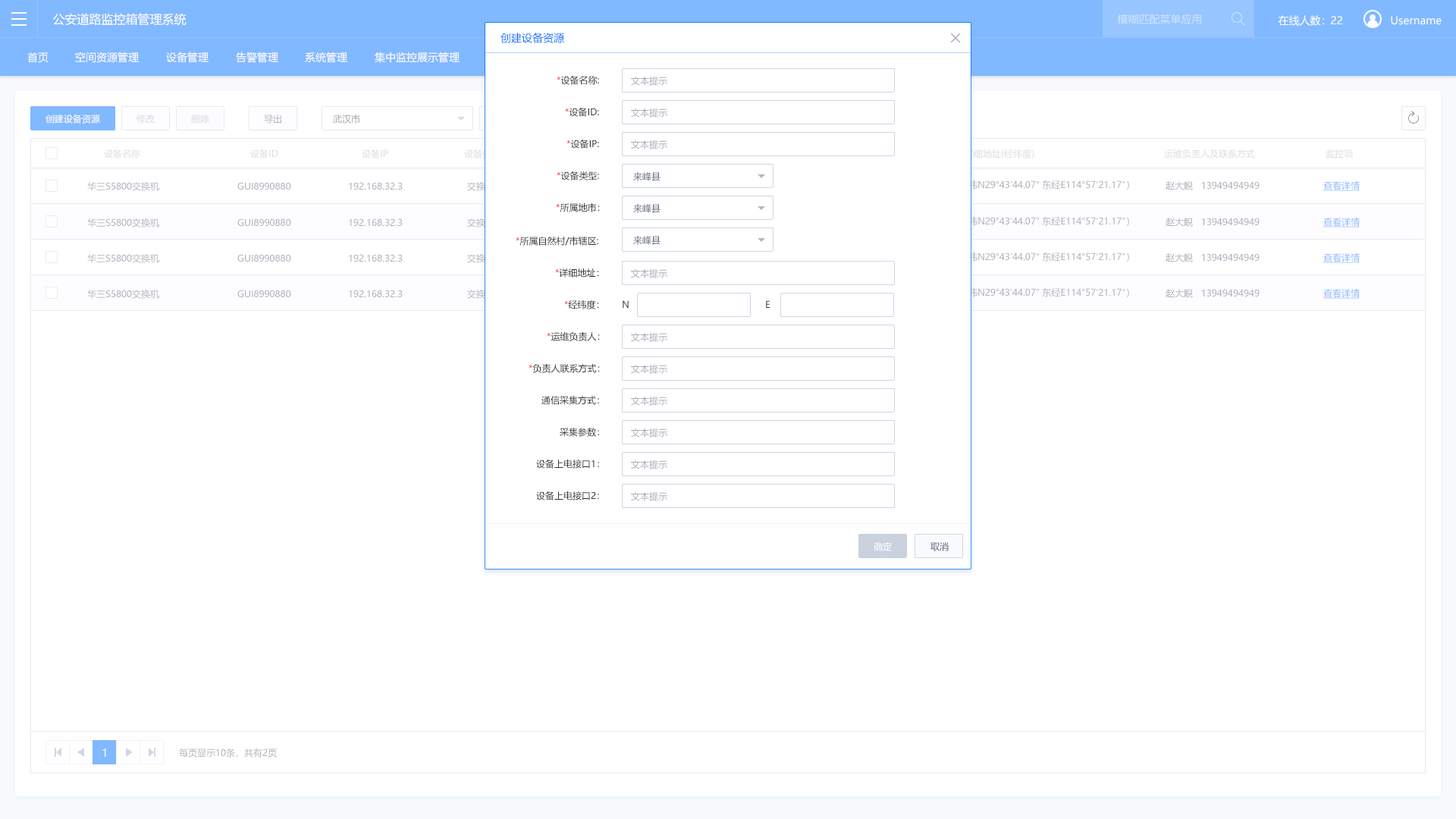
<style>
.page{position:relative;width:1456px;height:819px;background:#ffffff}
.page>*{position:absolute;margin:0}
.t1{font:12.1px "MicrosoftYaHei";color:#ffffff}
.t2{font:10.6px "MicrosoftYaHei";color:#cee4ff}
.t3{font:10.6px "MicrosoftYaHei";color:#ffffff}
.t4{font:10.6px "MicrosoftYaHei";color:#0072ff}
.t5{font:9.1px "MicrosoftYaHei";color:#333333}
.t6{font:9.1px "MicrosoftYaHei";color:#ff0000}
.t7{font:9.1px "MicrosoftYaHei";color:#a8acb5}
.t8{font:9.1px "MicrosoftYaHei";color:#ffffff}
.t9{font:9.1px "MicrosoftYaHei";color:#999999}
.t10{font:9.1px "MicrosoftYaHei";color:#d6d9e3}
.t11{font:9.1px "MicrosoftYaHei"}
.t12{font:9.1px "MicrosoftYaHei";color:#b3b3b3}
.t13{font:9.1px "MicrosoftYaHei";color:#dcdde1}
.t14{font:9.1px "MicrosoftYaHei";color:#596477}
.t15{font:9.1px "MicrosoftYaHei";color:#acb2bb}
.t16{font:9.1px "MicrosoftYaHei";color:#80b9ff;text-decoration:underline}
.t17{font:9.1px "MicrosoftYaHei";color:#fefeff}
.t18{font:10.6px "MicrosoftYaHei";color:#fefeff}
</style>
<div class="page">
<p class="t1" style="left:53px;top:13px;width:134px;height:13px">公安道路监控箱管理系统</p>
<p class="t2" style="left:1117px;top:14px;width:85px;height:11px">模糊匹配菜单应用</p>
<p class="t3" style="left:1278px;top:15px;width:46px;height:11px">在线人数：</p>
<p class="t3" style="left:1331px;top:16px;width:11px;height:8px">22</p>
<p class="t3" style="left:1391px;top:16px;width:51px;height:9px">Username</p>
<p class="t4" style="left:500px;top:33px;width:64px;height:10px">创建设备资源</p>
<p class="t3" style="left:27px;top:52px;width:22px;height:11px">首页</p>
<p class="t3" style="left:75px;top:52px;width:64px;height:11px">空间资源管理</p>
<p class="t3" style="left:166px;top:52px;width:43px;height:11px">设备管理</p>
<p class="t3" style="left:236px;top:52px;width:42px;height:11px">告警管理</p>
<p class="t3" style="left:305px;top:52px;width:42px;height:11px">系统管理</p>
<p class="t3" style="left:375px;top:52px;width:85px;height:11px">集中监控展示管理</p>
<p class="t5" style="left:557px;top:75px;width:42px;height:10px"><span class="t6">*</span>设备名称:</p>
<p class="t7" style="left:631px;top:77px;width:36px;height:9px">文本提示</p>
<p class="t8" style="left:45px;top:114px;width:55px;height:10px">创建设备资源</p>
<p class="t9" style="left:333px;top:114px;width:27px;height:10px">武汉市</p>
<p class="t5" style="left:565px;top:107px;width:34px;height:10px"><span class="t6">*</span>设备ID:</p>
<p class="t7" style="left:631px;top:108px;width:36px;height:10px">文本提示</p>
<p class="t10" style="left:136px;top:115px;width:19px;height:9px">修改</p>
<p class="t11" style="left:191px;top:115px;width:18px;height:9px">删除</p>
<p class="t12" style="left:264px;top:115px;width:17px;height:9px">导出</p>
<p class="t13" style="left:104px;top:149px;width:36px;height:9px">设备名称</p>
<p class="t13" style="left:250px;top:149px;width:28px;height:9px">设备ID</p>
<p class="t13" style="left:362px;top:149px;width:26px;height:9px">设备IP</p>
<p class="t11" style="left:464px;top:149px;width:36px;height:9px">设备类型</p>
<p class="t5" style="left:566px;top:139px;width:33px;height:10px"><span class="t6">*</span>设备IP:</p>
<p class="t7" style="left:631px;top:140px;width:36px;height:9px">文本提示</p>
<p class="t13" style="left:965px;top:149px;width:69px;height:9px">详细地址(经纬度)</p>
<p class="t13" style="left:1164px;top:149px;width:91px;height:9px">运维负责人及联系方式</p>
<p class="t13" style="left:1326px;top:149px;width:27px;height:9px">监控项</p>
<p class="t5" style="left:557px;top:171px;width:42px;height:9px"><span class="t6">*</span>设备类型:</p>
<p class="t14" style="left:633px;top:172px;width:27px;height:9px">来峰县</p>
<p class="t15" style="left:87px;top:182px;width:72px;height:9px">华三S5800交换机</p>
<p class="t15" style="left:237px;top:182px;width:54px;height:8px">GUI8990880</p>
<p class="t15" style="left:349px;top:182px;width:54px;height:8px">192.168.32.3</p>
<p class="t11" style="left:467px;top:182px;width:27px;height:9px">交换机</p>
<p class="t11" style="left:854px;top:180px;width:275px;height:10px">吴家山街道东吴大道1号（北纬N29°43′44.07″ 东经E114°57′21.17″）</p>
<p class="t15" style="left:1166px;top:181px;width:94px;height:9px">赵大鲵   13949494949</p>
<p class="t16" style="left:1323px;top:181px;width:37px;height:10px">查看详情</p>
<p class="t5" style="left:556px;top:202px;width:44px;height:10px"><span class="t6">*</span>所属地市：</p>
<p class="t14" style="left:633px;top:204px;width:27px;height:9px">来峰县</p>
<p class="t15" style="left:87px;top:218px;width:72px;height:9px">华三S5800交换机</p>
<p class="t15" style="left:237px;top:218px;width:54px;height:8px">GUI8990880</p>
<p class="t15" style="left:349px;top:218px;width:54px;height:8px">192.168.32.3</p>
<p class="t11" style="left:467px;top:218px;width:27px;height:9px">交换机</p>
<p class="t11" style="left:854px;top:216px;width:275px;height:10px">吴家山街道东吴大道1号（北纬N29°43′44.07″ 东经E114°57′21.17″）</p>
<p class="t15" style="left:1166px;top:218px;width:94px;height:9px">赵大鲵   13949494949</p>
<p class="t16" style="left:1323px;top:218px;width:37px;height:9px">查看详情</p>
<p class="t5" style="left:516px;top:236px;width:82px;height:10px"><span class="t6">*</span>所属自然村/市辖区:</p>
<p class="t14" style="left:633px;top:236px;width:27px;height:9px">来峰县</p>
<p class="t15" style="left:87px;top:254px;width:72px;height:9px">华三S5800交换机</p>
<p class="t15" style="left:237px;top:254px;width:54px;height:8px">GUI8990880</p>
<p class="t15" style="left:349px;top:254px;width:54px;height:8px">192.168.32.3</p>
<p class="t11" style="left:467px;top:254px;width:27px;height:9px">交换机</p>
<p class="t11" style="left:854px;top:252px;width:275px;height:10px">吴家山街道东吴大道1号（北纬N29°43′44.07″ 东经E114°57′21.17″）</p>
<p class="t15" style="left:1166px;top:253px;width:94px;height:9px">赵大鲵   13949494949</p>
<p class="t16" style="left:1323px;top:253px;width:37px;height:10px">查看详情</p>
<p class="t5" style="left:555px;top:268px;width:44px;height:10px"><span class="t6">*</span>详细地址：</p>
<p class="t7" style="left:631px;top:269px;width:36px;height:9px">文本提示</p>
<p class="t15" style="left:87px;top:290px;width:72px;height:9px">华三S5800交换机</p>
<p class="t15" style="left:237px;top:290px;width:54px;height:7px">GUI8990880</p>
<p class="t15" style="left:349px;top:290px;width:54px;height:7px">192.168.32.3</p>
<p class="t11" style="left:467px;top:290px;width:27px;height:9px">交换机</p>
<p class="t11" style="left:854px;top:287px;width:275px;height:10px">吴家山街道东吴大道1号（北纬N29°43′44.07″ 东经E114°57′21.17″）</p>
<p class="t15" style="left:1166px;top:289px;width:94px;height:9px">赵大鲵   13949494949</p>
<p class="t16" style="left:1323px;top:289px;width:37px;height:10px">查看详情</p>
<p class="t5" style="left:564px;top:300px;width:35px;height:9px"><span class="t6">*</span>经纬度：</p>
<p class="t5" style="left:623px;top:300px;width:6px;height:8px">N</p>
<p class="t5" style="left:766px;top:300px;width:4px;height:8px">E</p>
<p class="t5" style="left:547px;top:332px;width:53px;height:9px"><span class="t6">*</span>运维负责人：</p>
<p class="t7" style="left:631px;top:333px;width:36px;height:9px">文本提示</p>
<p class="t5" style="left:529px;top:364px;width:71px;height:9px"><span class="t6">*</span>负责人联系方式：</p>
<p class="t7" style="left:631px;top:365px;width:36px;height:9px">文本提示</p>
<p class="t5" style="left:541px;top:396px;width:58px;height:9px">通信采集方式：</p>
<p class="t7" style="left:631px;top:397px;width:36px;height:9px">文本提示</p>
<p class="t5" style="left:560px;top:428px;width:39px;height:9px">采集参数：</p>
<p class="t7" style="left:631px;top:428px;width:36px;height:10px">文本提示</p>
<p class="t5" style="left:536px;top:459px;width:63px;height:10px">设备上电接口1：</p>
<p class="t7" style="left:631px;top:460px;width:36px;height:9px">文本提示</p>
<p class="t5" style="left:536px;top:491px;width:63px;height:9px">设备上电接口2：</p>
<p class="t7" style="left:631px;top:492px;width:36px;height:9px">文本提示</p>
<p class="t17" style="left:874px;top:542px;width:18px;height:9px">确定</p>
<p class="t14" style="left:930px;top:542px;width:19px;height:9px">取消</p>
<p class="t18" style="left:102px;top:748px;width:4px;height:9px">1</p>
<p class="t15" style="left:179px;top:748px;width:98px;height:10px">每页显示10条，共有2页</p>
</div>
